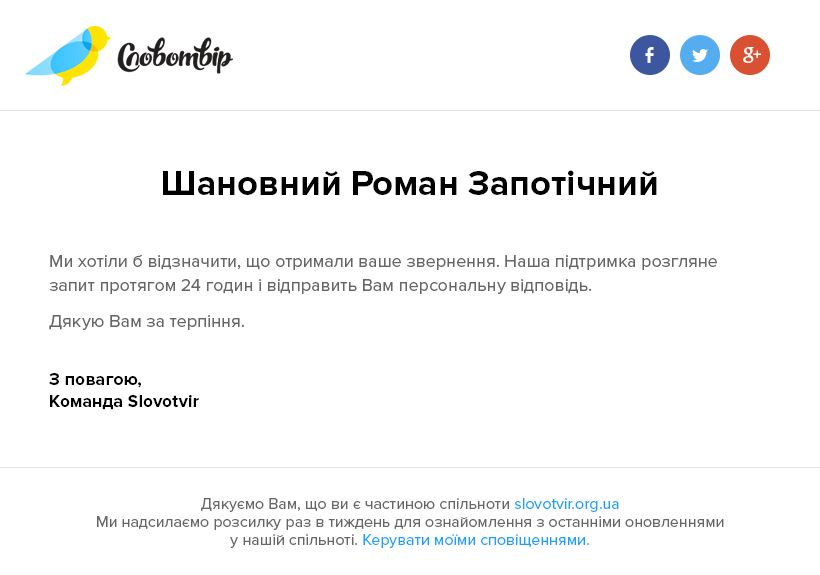
<style>
.page{position:relative;width:820px;height:575px;background:#ffffff}
.page>*{position:absolute;margin:0}
.t1{font:36px "ProximaNova-Bold";color:#000000}
.t2{font:18px/36px "ProximaNova-Regular";color:#666666}
.t3{font:18px/24px "ProximaNova-Regular";color:#666666}
.t4{font:18px/22px "ProximaNova-Bold";color:#000000}
.t5{font:16px/18px "ProximaNova-Regular";color:#666666}
.t6{font:16px/18px "ProximaNova-Regular";color:#17a2ff}
</style>
<div class="page">
<p class="t1" style="left:163px;top:170px;width:494px;height:25px">Шановний Роман Запотічний</p>
<p class="t2" style="left:49px;top:255px;width:668px;height:155px">Ми хотіли б відзначити, що отримали ваше звернення. Наша підтримка розгляне<br><span class="t3">запит протягом 24 годин і відправить Вам персональну відповідь.<br></span>Дякую Вам за терпіння.<br><br><span class="t4">З повагою,<br>Команда Slovotvir</span></p>
<p class="t5" style="left:97px;top:498px;width:627px;height:50px;text-align:center">Дякуємо Вам, що ви є частиною спільноти <span class="t6">slovotvir.org.ua</span><br>Ми надсилаємо розсилку раз в тиждень для ознайомлення з останніми оновленнями<br>у нашій спільноті. <span class="t6">Керувати моїми сповіщеннями.</span></p>
</div>
